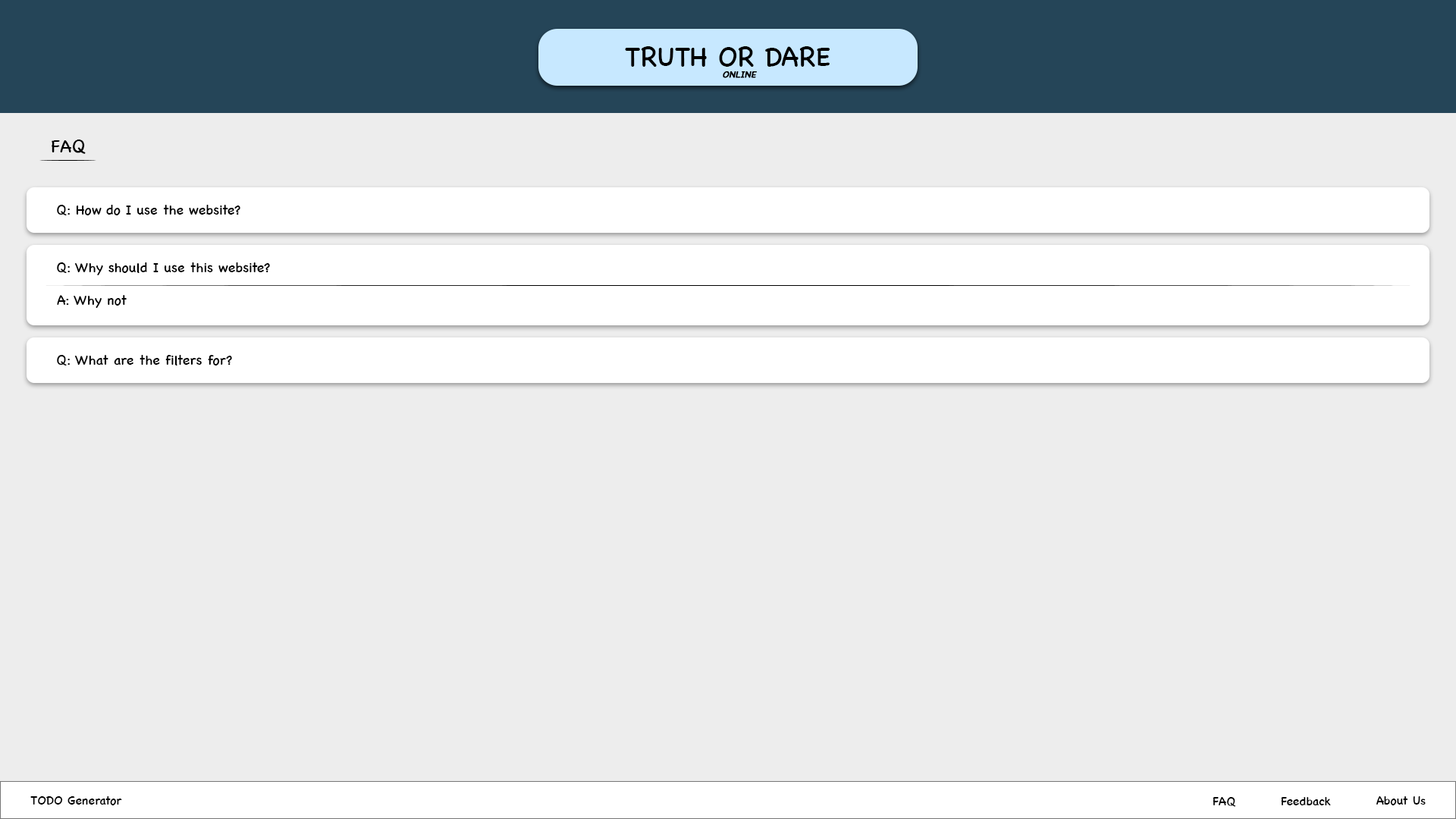
<style>
.page{position:relative;width:1456px;height:819px;background:#ededed}
.page>*{position:absolute;margin:0}
.t1{font:27.3px "ChalkboardSE-Regular";color:#000000}
.t2{font:9.1px "ChalkboardSE-Regular";color:#000000;font-weight:bold;font-style:italic}
.t3{font:18.2px "ChalkboardSE-Regular";color:#000000}
.t4{font:13.6px "ChalkboardSE-Regular";color:#000000}
.t5{font:12.1px "ChalkboardSE-Regular";color:#000000}
</style>
<div class="page">
<p class="t1" style="left:625px;top:46px;width:205px;height:21px">TRUTH OR DARE</p>
<p class="t2" style="left:723px;top:71px;width:34px;height:7px">ONLINE</p>
<p class="t3" style="left:52px;top:140px;width:34px;height:14px">FAQ</p>
<p class="t4" style="left:57px;top:205px;width:183px;height:10px">Q: How do I use the website?</p>
<p class="t4" style="left:57px;top:262px;width:213px;height:13px">Q: Why should I use this website?</p>
<p class="t4" style="left:57px;top:295px;width:70px;height:13px">A: Why not</p>
<p class="t4" style="left:57px;top:355px;width:175px;height:11px">Q: What are the filters for?</p>
<p class="t5" style="left:30px;top:796px;width:92px;height:9px">TODO Generator</p>
<p class="t5" style="left:1213px;top:797px;width:23px;height:10px">FAQ</p>
<p class="t5" style="left:1281px;top:797px;width:50px;height:8px">Feedback</p>
<p class="t5" style="left:1376px;top:796px;width:50px;height:9px">About Us</p>
</div>
